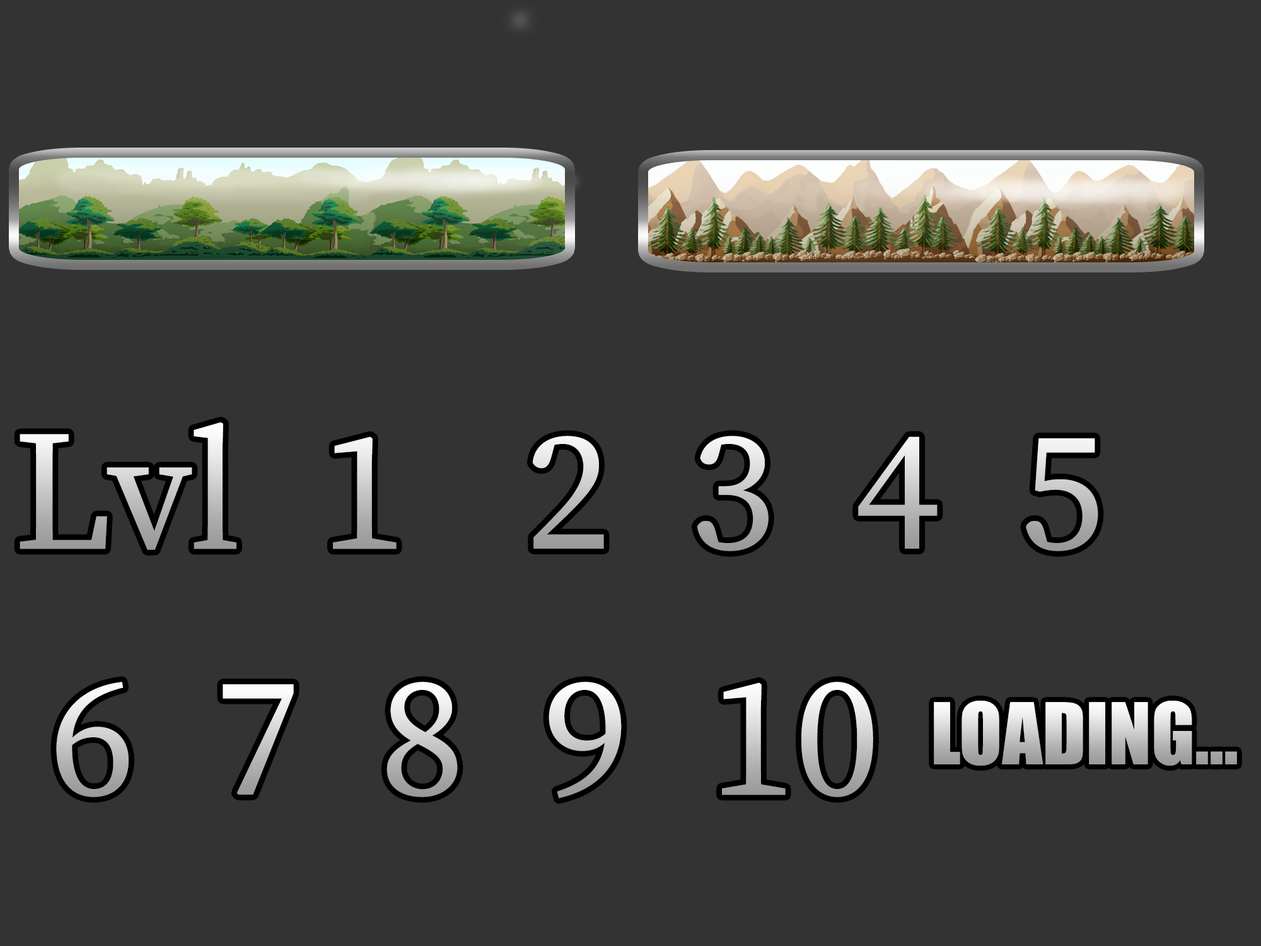
<style>
.page{position:relative;width:1261px;height:946px;background:#333333}
.page>*{position:absolute;margin:0}
.t1{font:170.7px "SourceSerifRoman-Regular"}
.t2{font:78.8px "Impact"}
</style>
<div class="page">
<p class="t1" style="left:20px;top:422px;width:1078px;height:129px">Lvl  1   2  3  4  5</p>
<p class="t1" style="left:56px;top:682px;width:817px;height:116px">6  7  8  9  10</p>
<p class="t2" style="left:934px;top:700px;width:303px;height:65px">LOADING...</p>
</div>
